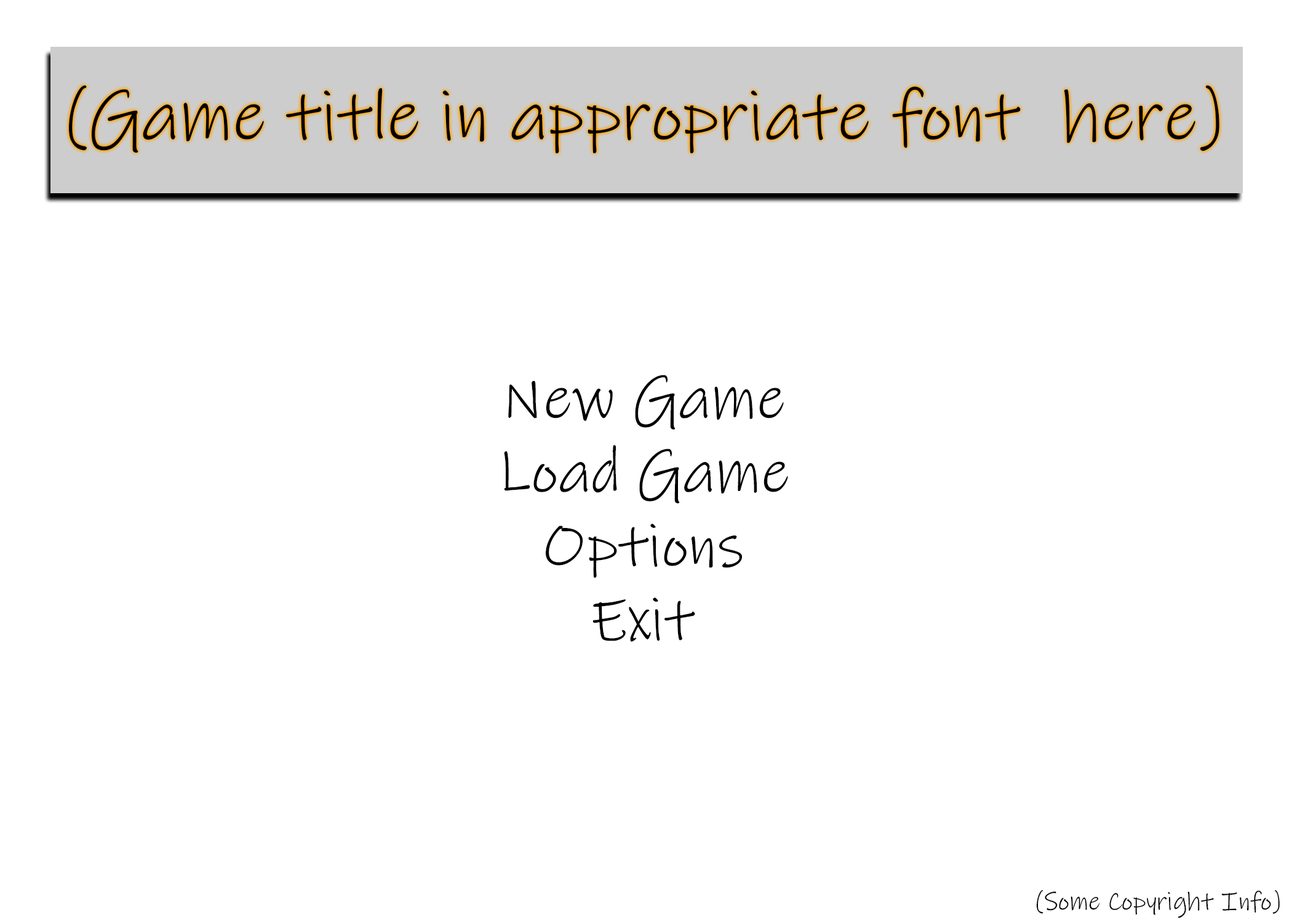
<style>
.page{position:relative;width:1292px;height:923px;background:#ffffff}
.page>*{position:absolute;margin:0}
.t1{font:71.5px "InkFree";color:#000000}
.t2{font:61.5px "InkFree";color:#000000}
.t3{font:25.6px "InkFree";color:#000000}
</style>
<div class="page">
<p class="t1" style="left:68px;top:85px;width:1151px;height:69px">(Game title in appropriate font  here)</p>
<p class="t2" style="left:504px;top:375px;width:284px;height:267px;text-align:center">New Game<br>Load Game<br>Options<br>Exit</p>
<p class="t3" style="left:1036px;top:890px;width:244px;height:28px">(Some Copyright Info)</p>
</div>
